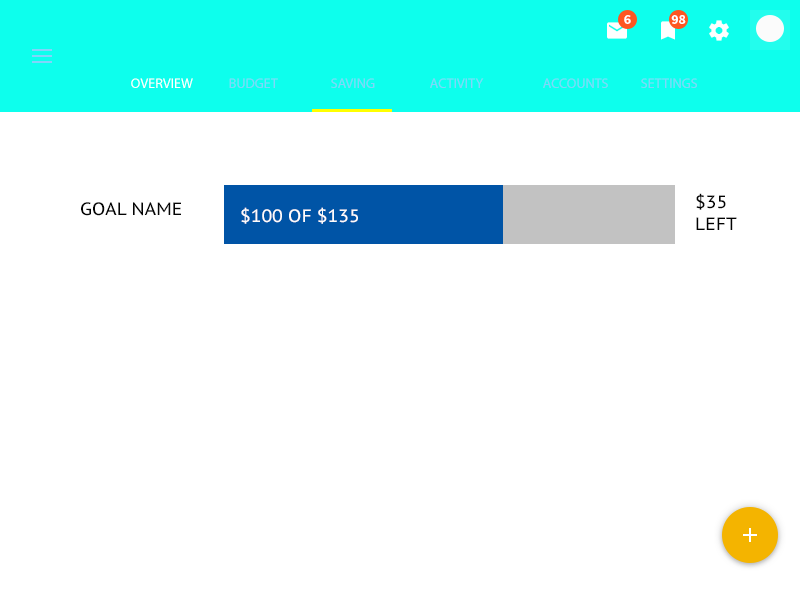
<style>
.page{position:relative;width:800px;height:600px;background:#ffffff}
.page>*{position:absolute;margin:0}
.t1{font:14px "SourceSansPro-Bold";color:#ffffff}
.t2{font:14px "MyriadPro-Regular";color:#ffffff;text-transform:uppercase}
.t3{font:14px "MyriadPro-Regular";color:#81d4fa;text-transform:uppercase}
.t4{font:18px/22px "PTSans-Caption";color:#020202;text-transform:uppercase}
.t5{font:18px "PTSans-Caption";color:#040404;text-transform:uppercase}
.t6{font:18px "PTSans-Caption";color:#fefcfc;text-transform:uppercase}
</style>
<div class="page">
<p class="t1" style="left:624px;top:15px;width:7px;height:9px">6</p>
<p class="t1" style="left:671px;top:15px;width:15px;height:9px">98</p>
<p class="t2" style="left:131px;top:78px;width:62px;height:10px">OVERVIEW</p>
<p class="t3" style="left:229px;top:78px;width:49px;height:10px">budget</p>
<p class="t3" style="left:331px;top:78px;width:44px;height:10px">Saving</p>
<p class="t3" style="left:430px;top:78px;width:54px;height:10px">Activity</p>
<p class="t3" style="left:543px;top:78px;width:65px;height:10px">Accounts</p>
<p class="t3" style="left:641px;top:78px;width:56px;height:10px">Settings</p>
<p class="t4" style="left:696px;top:193px;width:41px;height:37px">$35<br>lEFT</p>
<p class="t5" style="left:81px;top:202px;width:100px;height:14px">Goal nAME</p>
<p class="t6" style="left:241px;top:207px;width:117px;height:17px">$100 OF $135</p>
</div>
